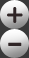
<style>
.page{position:relative;width:29px;height:58px}
.page>*{position:absolute;margin:0}
.t1{font:29.1px "Courier-Bold";color:#302627}
</style>
<div class="page">
<p class="t1" style="left:7px;top:7px;width:16px;height:16px">+</p>
<p class="t1" style="left:8px;top:42px;width:14px;height:4px">-</p>
</div>
